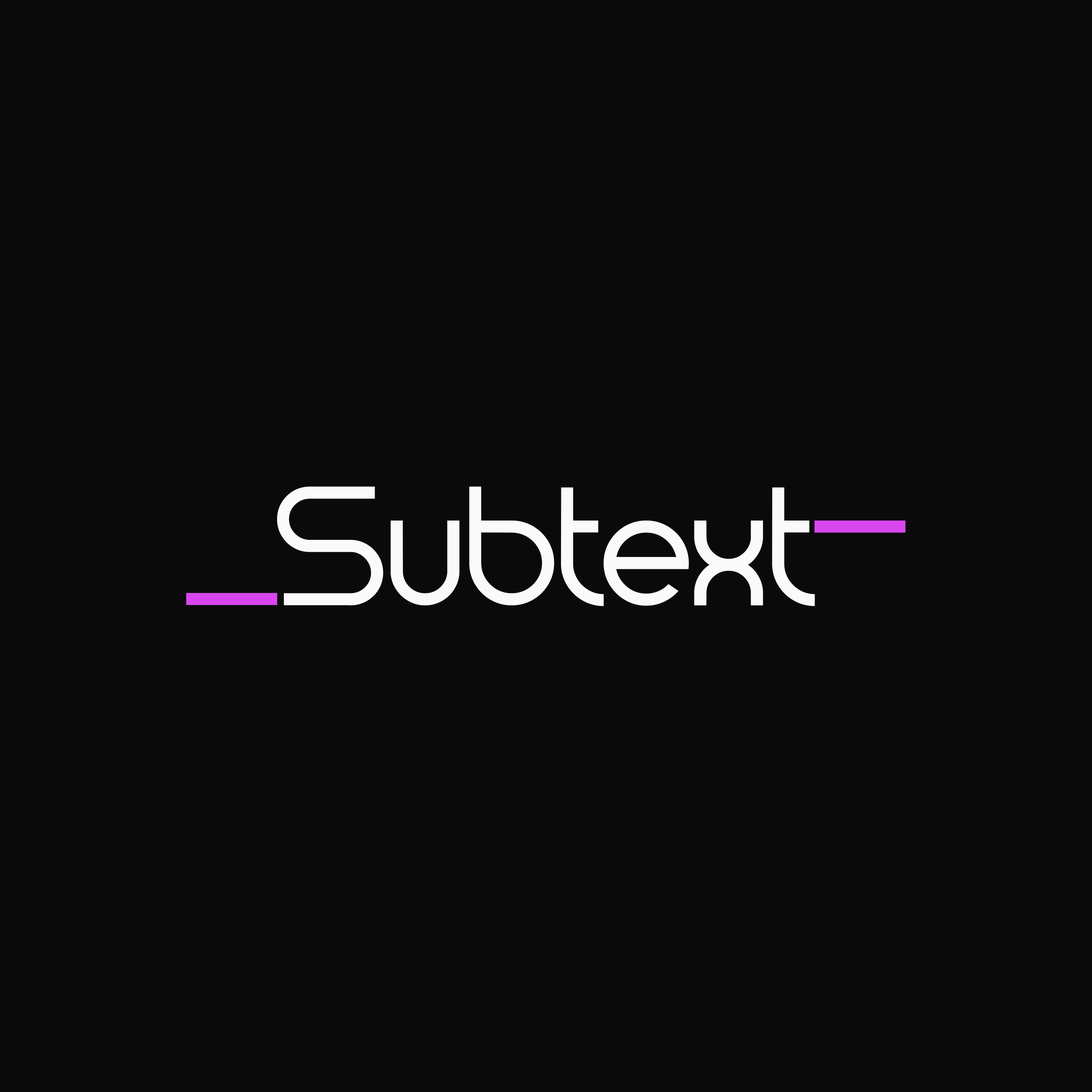
<style>
.page{position:relative;width:1092px;height:1092px;background:#0a0a0a}
.page>*{position:absolute;margin:0}
.t1{font:169.6px "Diamonds-Regular";color:#fafafa}
.t2{font:169.6px "Diamonds-Regular";color:#d946ef}
</style>
<div class="page">
<p class="t1" style="left:277px;top:486px;width:538px;height:120px">Subtext</p>
<p class="t2" style="left:814px;top:521px;width:92px;height:12px">_</p>
<p class="t2" style="left:186px;top:593px;width:91px;height:12px">_</p>
</div>
